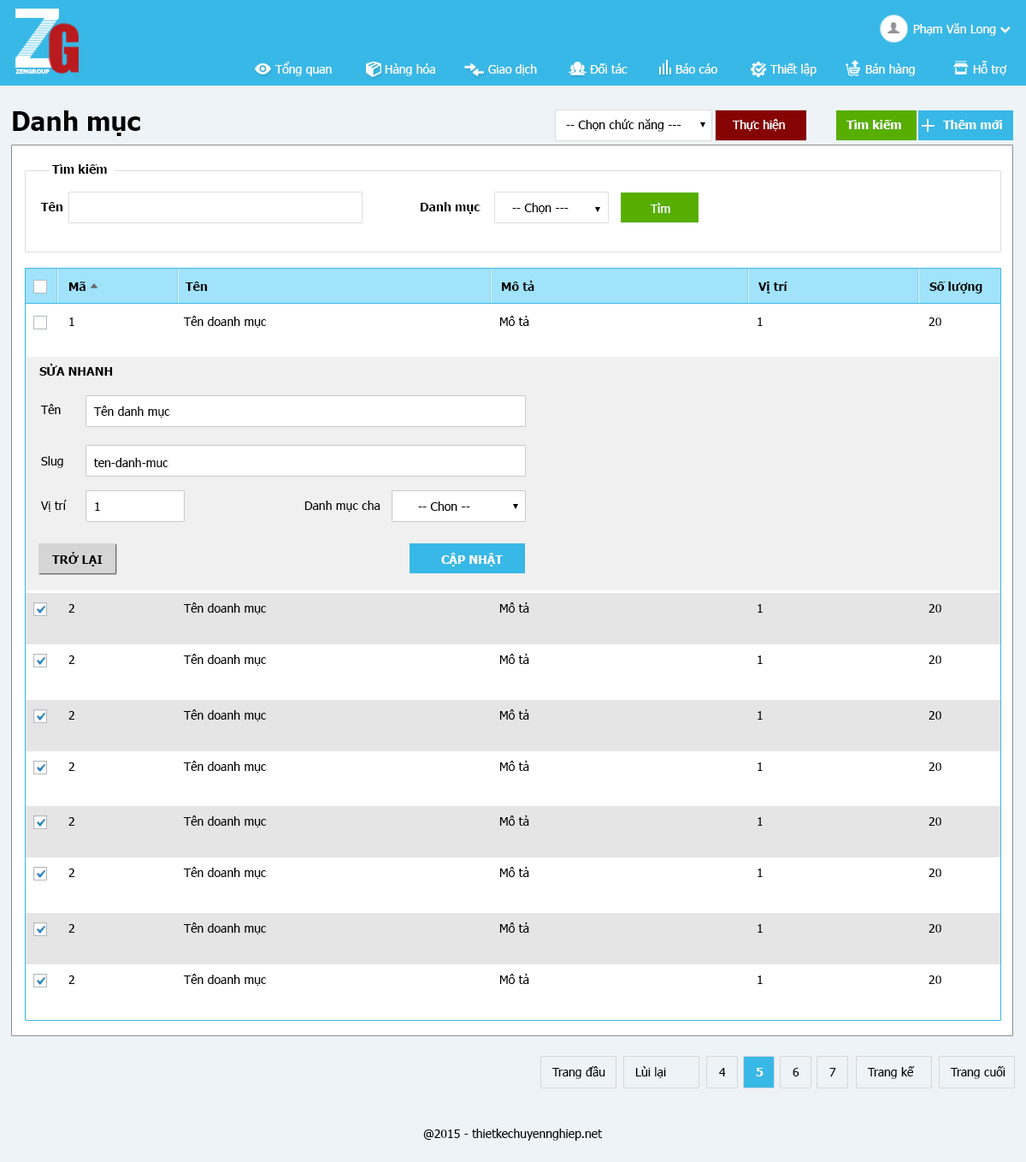
<style>
.page{position:relative;width:1026px;height:1162px;background:#ffffff}
.page>*{position:absolute;margin:0}
.t1{font:12px "Tahoma";color:#ffffff}
.t2{font:6.1px "Tahoma-Bold";color:#ffffff}
.t3{font:26.4px "Tahoma-Bold";color:#000000}
.t4{font:12.3px "Tahoma";color:#000000}
.t5{font:12.3px "Tahoma";color:#ffffff}
.t6{font:12.3px "Tahoma-Bold";color:#ffffff}
.t7{font:12.3px "Tahoma-Bold";color:#000000}
</style>
<div class="page">
<p class="t1" style="left:914px;top:23px;width:83px;height:13px">Phạm Văn Long</p>
<p class="t1" style="left:275px;top:62px;width:57px;height:14px">Tổng quan</p>
<p class="t1" style="left:385px;top:63px;width:50px;height:13px">Hàng hóa</p>
<p class="t1" style="left:488px;top:64px;width:49px;height:11px">Giao dịch</p>
<p class="t1" style="left:590px;top:63px;width:38px;height:11px">Đối tác</p>
<p class="t1" style="left:676px;top:63px;width:42px;height:11px">Báo cáo</p>
<p class="t1" style="left:770px;top:63px;width:47px;height:13px">Thiết lập</p>
<p class="t1" style="left:866px;top:63px;width:49px;height:13px">Bán hàng</p>
<p class="t1" style="left:973px;top:61px;width:35px;height:14px">Hỗ trợ</p>
<p class="t2" style="left:15px;top:68px;width:35px;height:6px">ZENGROUP</p>
<p class="t3" style="left:13px;top:110px;width:127px;height:26px">Danh mục</p>
<p class="t4" style="left:566px;top:119px;width:116px;height:13px">-- Chọn chức năng ---</p>
<p class="t5" style="left:732px;top:119px;width:53px;height:12px">Thực hiện</p>
<p class="t6" style="left:847px;top:120px;width:55px;height:9px">Tìm kiếm</p>
<p class="t6" style="left:944px;top:120px;width:59px;height:9px">Thêm mới</p>
<p class="t7" style="left:52px;top:164px;width:55px;height:10px">Tìm kiếm</p>
<p class="t7" style="left:41px;top:202px;width:22px;height:9px">Tên</p>
<p class="t7" style="left:421px;top:202px;width:60px;height:12px">Danh mục</p>
<p class="t4" style="left:512px;top:203px;width:57px;height:11px">-- Chọn ---</p>
<p class="t5" style="left:650px;top:203px;width:21px;height:10px">Tìm</p>
<p class="t7" style="left:69px;top:281px;width:17px;height:10px">Mã</p>
<p class="t7" style="left:186px;top:281px;width:22px;height:10px">Tên</p>
<p class="t7" style="left:502px;top:281px;width:33px;height:10px">Mô tả</p>
<p class="t7" style="left:759px;top:281px;width:29px;height:12px">Vị trí</p>
<p class="t7" style="left:930px;top:281px;width:53px;height:12px">Số lượng</p>
<p class="t4" style="left:69px;top:317px;width:5px;height:9px">1</p>
<p class="t4" style="left:183px;top:316px;width:84px;height:12px">Tên doanh mục</p>
<p class="t4" style="left:500px;top:316px;width:30px;height:10px">Mô tả</p>
<p class="t4" style="left:758px;top:317px;width:5px;height:9px">1</p>
<p class="t4" style="left:929px;top:317px;width:13px;height:9px">20</p>
<p class="t7" style="left:39px;top:364px;width:74px;height:12px">SỬA NHANH</p>
<p class="t4" style="left:40px;top:404px;width:21px;height:10px">Tên</p>
<p class="t4" style="left:93px;top:405px;width:77px;height:12px">Tên danh mục</p>
<p class="t4" style="left:41px;top:456px;width:22px;height:12px">Slug</p>
<p class="t4" style="left:94px;top:458px;width:75px;height:9px">ten-danh-muc</p>
<p class="t4" style="left:40px;top:500px;width:27px;height:12px">Vị trí</p>
<p class="t4" style="left:95px;top:502px;width:5px;height:9px">1</p>
<p class="t4" style="left:305px;top:500px;width:76px;height:12px">Danh mục cha</p>
<p class="t4" style="left:418px;top:501px;width:52px;height:10px">-- Chon --</p>
<p class="t7" style="left:52px;top:552px;width:51px;height:14px">TRỞ LẠI</p>
<p class="t6" style="left:441px;top:553px;width:62px;height:13px">CẬP NHẬT</p>
<p class="t4" style="left:68px;top:604px;width:7px;height:8px">2</p>
<p class="t4" style="left:183px;top:602px;width:84px;height:12px">Tên doanh mục</p>
<p class="t4" style="left:500px;top:602px;width:30px;height:10px">Mô tả</p>
<p class="t4" style="left:758px;top:604px;width:5px;height:8px">1</p>
<p class="t4" style="left:929px;top:604px;width:13px;height:8px">20</p>
<p class="t4" style="left:183px;top:654px;width:84px;height:12px">Tên doanh mục</p>
<p class="t4" style="left:500px;top:654px;width:30px;height:10px">Mô tả</p>
<p class="t4" style="left:68px;top:655px;width:7px;height:9px">2</p>
<p class="t4" style="left:758px;top:655px;width:5px;height:9px">1</p>
<p class="t4" style="left:929px;top:655px;width:13px;height:9px">20</p>
<p class="t4" style="left:68px;top:711px;width:7px;height:8px">2</p>
<p class="t4" style="left:183px;top:709px;width:84px;height:12px">Tên doanh mục</p>
<p class="t4" style="left:500px;top:709px;width:30px;height:10px">Mô tả</p>
<p class="t4" style="left:758px;top:711px;width:5px;height:8px">1</p>
<p class="t4" style="left:929px;top:711px;width:13px;height:8px">20</p>
<p class="t4" style="left:183px;top:760px;width:84px;height:12px">Tên doanh mục</p>
<p class="t4" style="left:500px;top:760px;width:30px;height:11px">Mô tả</p>
<p class="t4" style="left:68px;top:762px;width:7px;height:9px">2</p>
<p class="t4" style="left:758px;top:762px;width:5px;height:9px">1</p>
<p class="t4" style="left:929px;top:762px;width:13px;height:9px">20</p>
<p class="t4" style="left:68px;top:817px;width:7px;height:8px">2</p>
<p class="t4" style="left:183px;top:815px;width:84px;height:12px">Tên doanh mục</p>
<p class="t4" style="left:500px;top:815px;width:30px;height:10px">Mô tả</p>
<p class="t4" style="left:758px;top:817px;width:5px;height:8px">1</p>
<p class="t4" style="left:929px;top:817px;width:13px;height:8px">20</p>
<p class="t4" style="left:68px;top:868px;width:7px;height:9px">2</p>
<p class="t4" style="left:183px;top:867px;width:84px;height:12px">Tên doanh mục</p>
<p class="t4" style="left:500px;top:867px;width:30px;height:10px">Mô tả</p>
<p class="t4" style="left:758px;top:868px;width:5px;height:9px">1</p>
<p class="t4" style="left:929px;top:868px;width:13px;height:9px">20</p>
<p class="t4" style="left:68px;top:924px;width:7px;height:8px">2</p>
<p class="t4" style="left:183px;top:922px;width:84px;height:12px">Tên doanh mục</p>
<p class="t4" style="left:500px;top:922px;width:30px;height:10px">Mô tả</p>
<p class="t4" style="left:758px;top:924px;width:5px;height:8px">1</p>
<p class="t4" style="left:929px;top:924px;width:13px;height:8px">20</p>
<p class="t4" style="left:68px;top:975px;width:7px;height:9px">2</p>
<p class="t4" style="left:183px;top:973px;width:84px;height:12px">Tên doanh mục</p>
<p class="t4" style="left:500px;top:973px;width:30px;height:11px">Mô tả</p>
<p class="t4" style="left:758px;top:975px;width:5px;height:9px">1</p>
<p class="t4" style="left:929px;top:975px;width:13px;height:9px">20</p>
<p class="t4" style="left:552px;top:1066px;width:54px;height:13px">Trang đầu</p>
<p class="t4" style="left:636px;top:1066px;width:30px;height:12px">Lùi lại</p>
<p class="t4" style="left:719px;top:1068px;width:7px;height:8px">4</p>
<p class="t6" style="left:756px;top:1068px;width:8px;height:8px">5</p>
<p class="t4" style="left:793px;top:1068px;width:7px;height:8px">6</p>
<p class="t4" style="left:830px;top:1068px;width:7px;height:8px">7</p>
<p class="t4" style="left:867px;top:1066px;width:48px;height:13px">Trang kế</p>
<p class="t4" style="left:950px;top:1066px;width:56px;height:13px">Trang cuối</p>
<p class="t4" style="left:423px;top:1128px;width:179px;height:12px">@2015 - thietkechuyennghiep.net</p>
</div>
